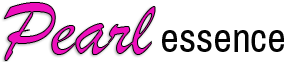
<style>
.page{position:relative;width:295px;height:62px;background:#ffffff}
.page>*{position:absolute;margin:0}
.t1{font:81.6px "BrushScriptMT"}
.t2{font:41.3px "ArchivoNarrow-Regular";color:#040404}
</style>
<div class="page">
<p class="t1" style="left:3px;top:2px;width:153px;height:59px">Pearl</p>
<p class="t2" style="left:162px;top:30px;width:122px;height:22px">essence</p>
</div>
